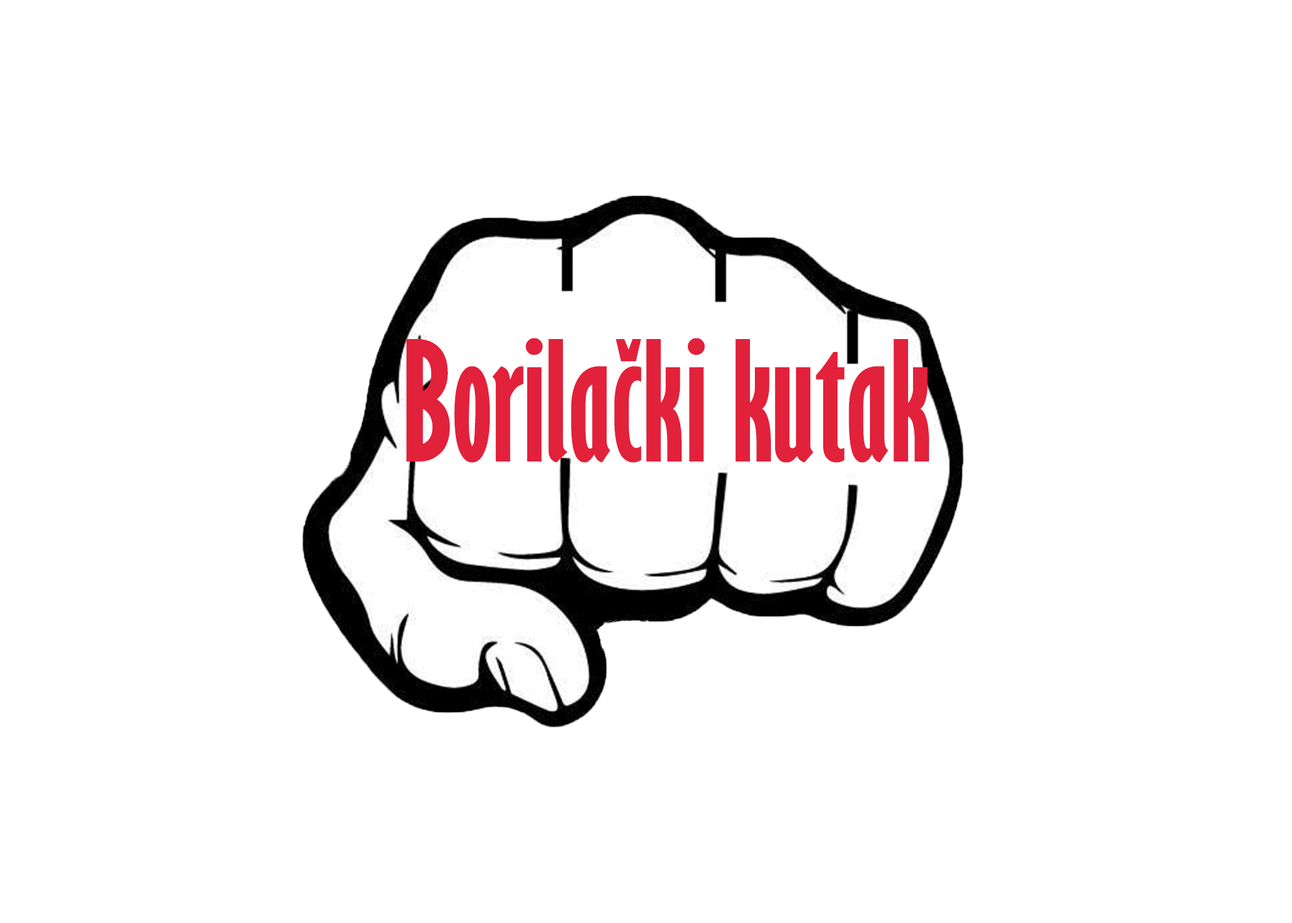
<style>
.page{position:relative;width:1292px;height:923px;background:#ffffff}
.page>*{position:absolute;margin:0}
.t1{font:153.8px "GillSansMT-ExtraCondensedBold";color:#e2213b}
</style>
<div class="page">
<p class="t1" style="left:406px;top:338px;width:523px;height:125px">Borilački kutak</p>
</div>
